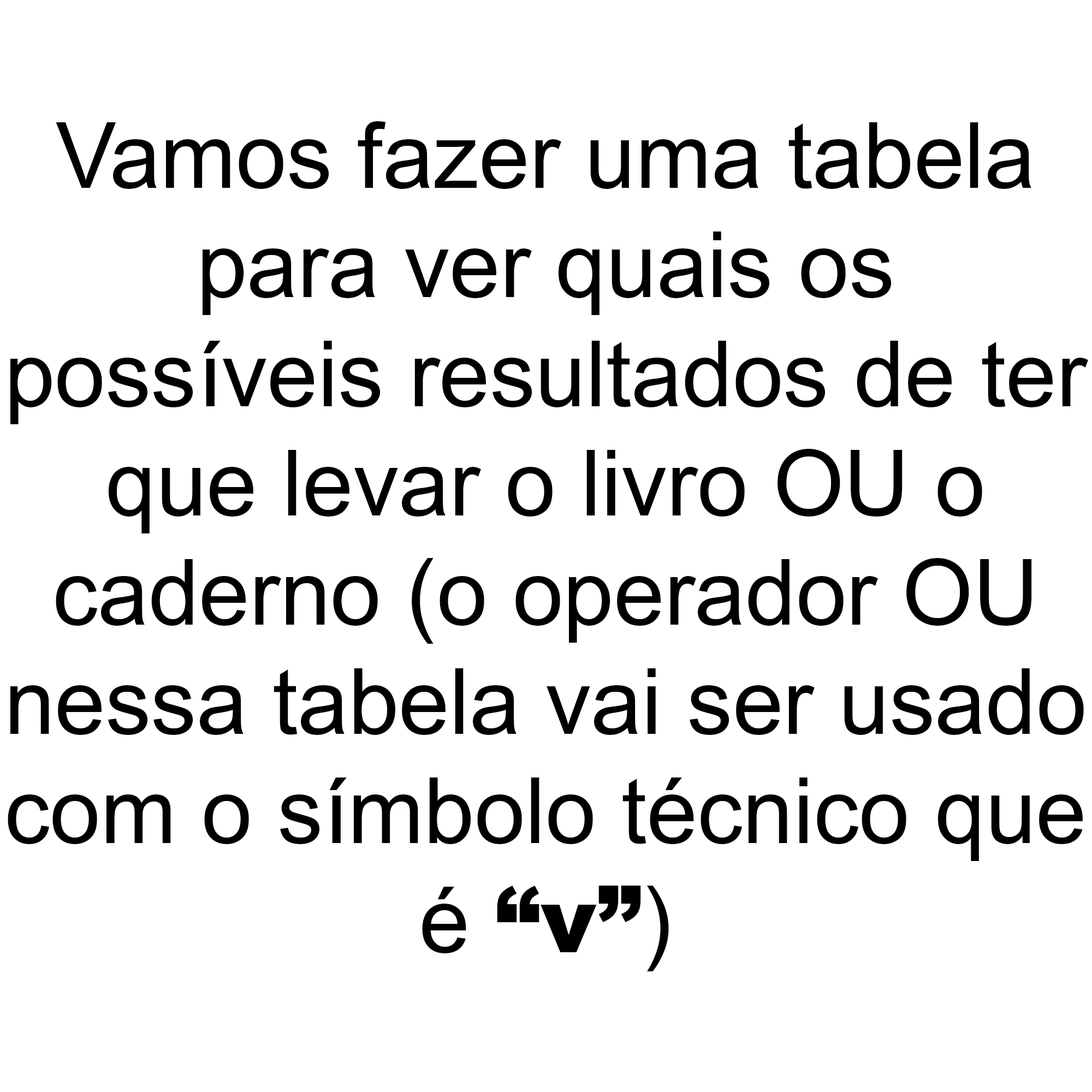
<style>
.page{position:relative;width:1092px;height:1092px;background:#ffffff}
.page>*{position:absolute;margin:0}
.t1{font:91px "ArialMT";color:#000000}
.t2{font:91px "Arial-Black";color:#000000}
</style>
<div class="page">
<p class="t1" style="left:8px;top:121px;width:1080px;height:850px;text-align:center">Vamos fazer uma tabela<br>para ver quais os<br>possíveis resultados de ter<br>que levar o livro OU o<br>caderno (o operador OU<br>nessa tabela vai ser usado<br>com o símbolo técnico que<br>é <span class="t2">“v”</span>)</p>
</div>
